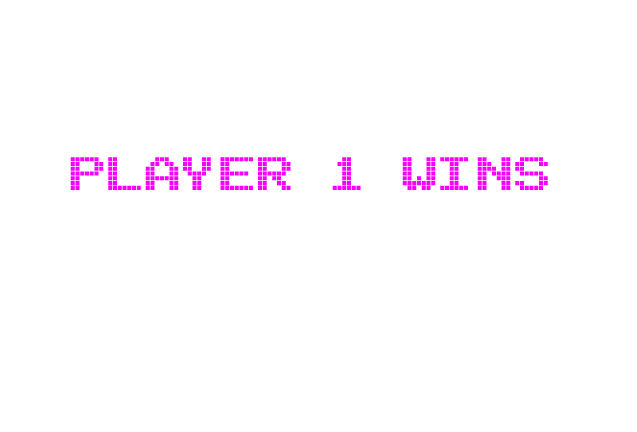
<style>
.page{position:relative;width:637px;height:432px;background:#ffffff}
.page>*{position:absolute;margin:0}
.t1{font:72px "Arcade";color:#f800ff}
</style>
<div class="page">
<p class="t1" style="left:70px;top:157px;width:478px;height:33px">PLAYER 1 WINS</p>
</div>
